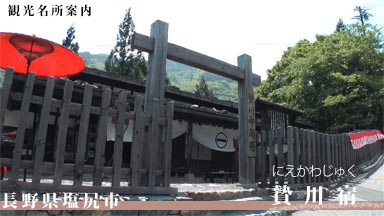
<style>
.page{position:relative;width:384px;height:216px}
.page>*{position:absolute;margin:0}
.t1{font:12px "KozMinPr6N-Heavy";letter-spacing:0.2em;color:#000000}
.t2{font:13.6px "KozGoPro-Light";letter-spacing:-0.1em;color:#ffffff}
.t3{font:21px "KozMinPr6N-Heavy";letter-spacing:0.56em;color:#ffffff}
.t4{font:17px "KozMinPr6N-Heavy";letter-spacing:0.2em;color:#ffffff}
</style>
<div class="page">
<p class="t1" style="left:8px;top:4px;width:84px;height:13px">観光名所案内</p>
<p class="t2" style="left:273px;top:164px;width:82px;height:14px">にえかわじゅく</p>
<p class="t3" style="left:271px;top:185px;width:86px;height:20px">贄川宿</p>
<p class="t4" style="left:1px;top:192px;width:119px;height:17px">長野県塩尻市</p>
</div>
